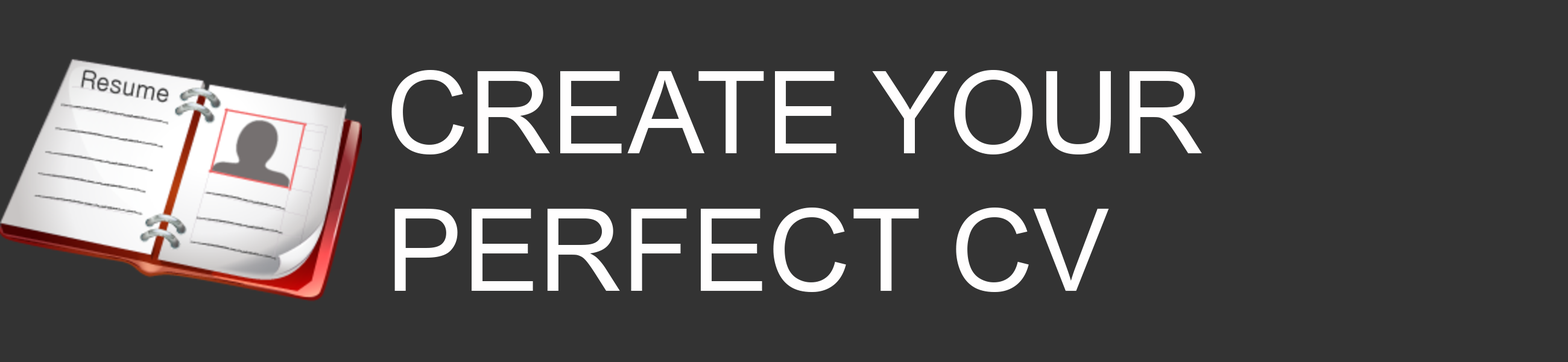
<style>
.page{position:relative;width:1568px;height:362px;background:#333333}
.page>*{position:absolute;margin:0}
.t1{font:114.6px "ArialMT";color:#fffefe}
</style>
<div class="page">
<p class="t1" style="left:391px;top:69px;width:811px;height:223px">CREATE YOUR    PERFECT CV</p>
</div>
